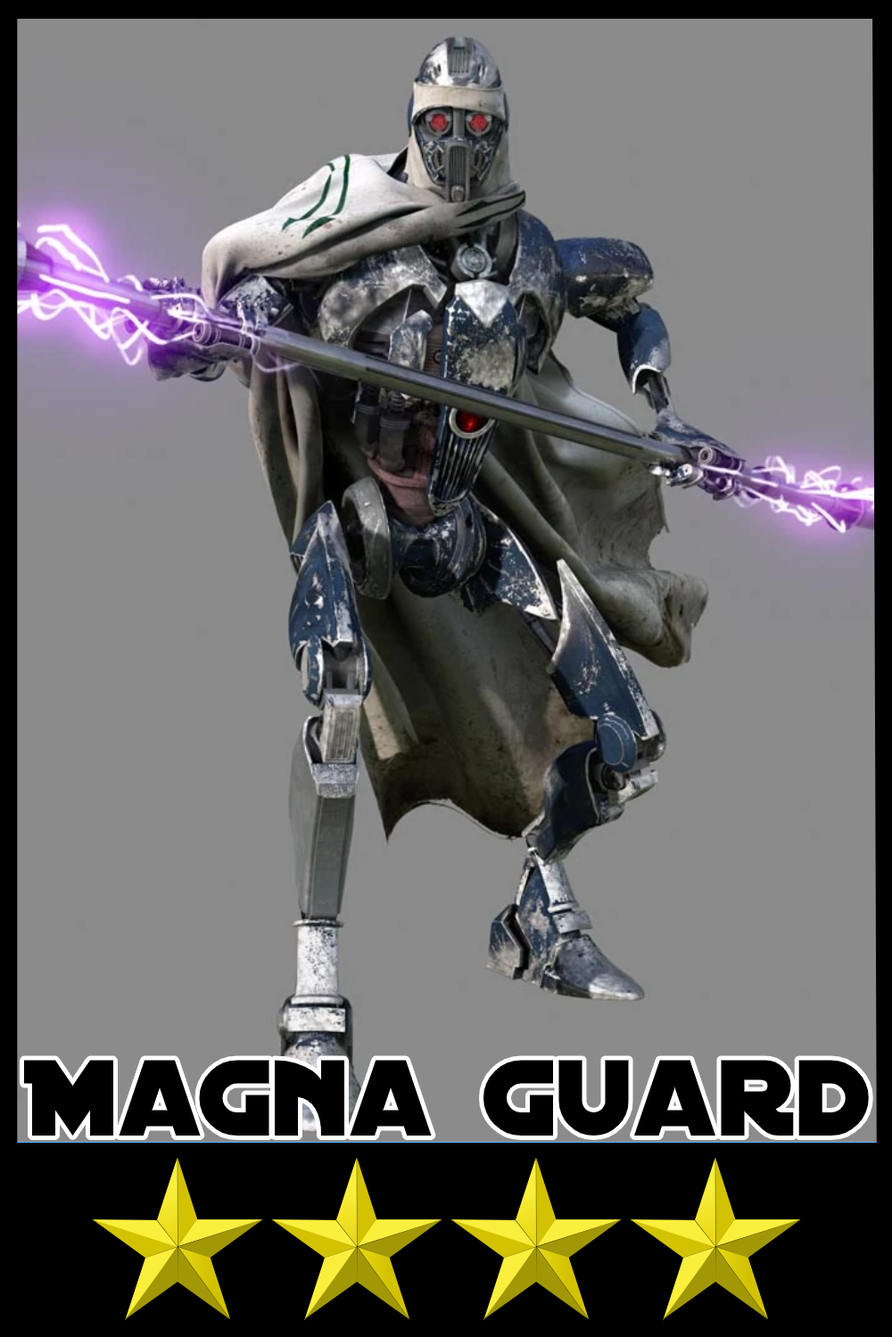
<style>
.page{position:relative;width:892px;height:1337px;background:#8b8b8b}
.page>*{position:absolute;margin:0}
.t1{font:115.9px "DistantGalaxy";color:#000000}
</style>
<div class="page">
<p class="t1" style="left:23px;top:1060px;width:845px;height:76px">Magna Guard</p>
</div>
